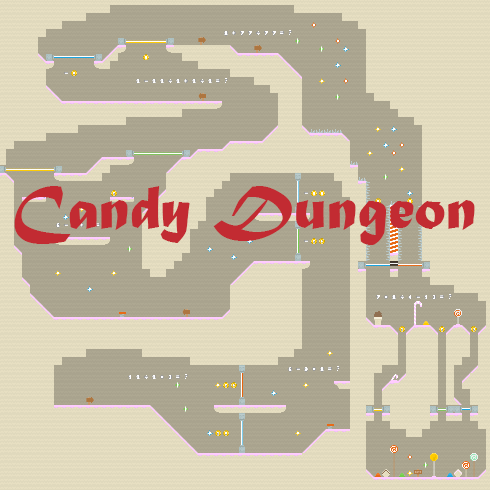
<style>
.page{position:relative;width:490px;height:490px;background:#e0d9bd}
.page>*{position:absolute;margin:0}
.t1{font:64px "MaturaMTScriptCapitals";color:#c22b32}
</style>
<div class="page">
<p class="t1" style="left:14px;top:186px;width:461px;height:59px">Candy Dungeon</p>
</div>
